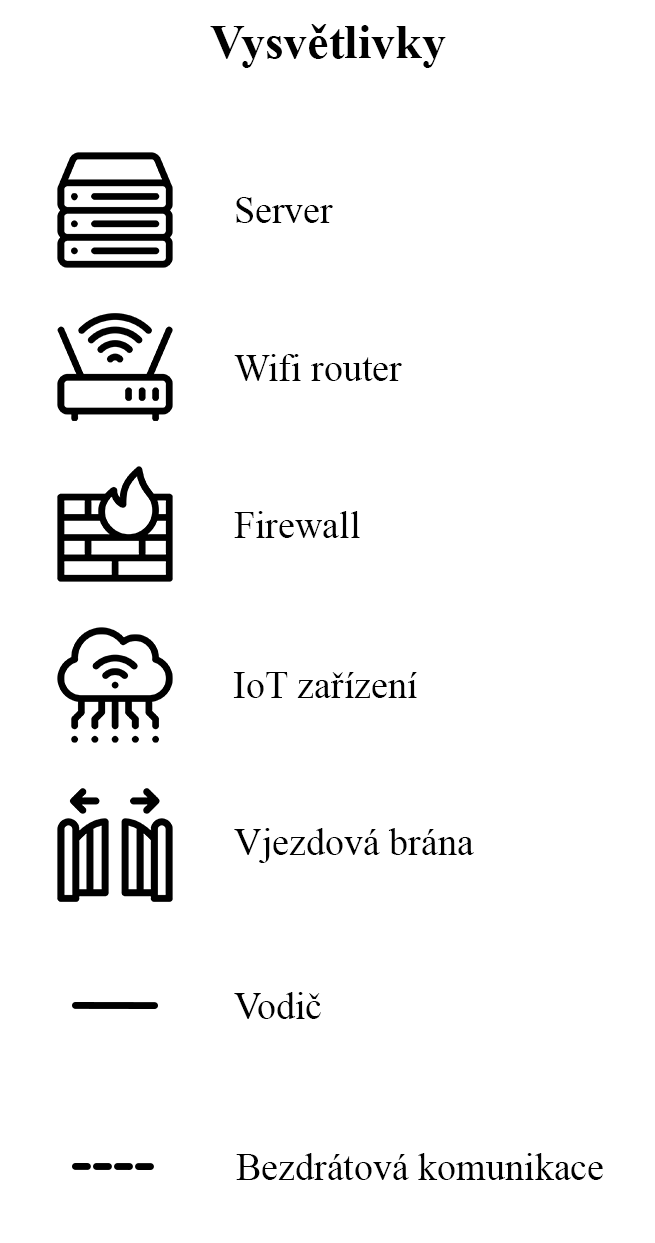
<style>
.page{position:relative;width:655px;height:1243px;background:#ffffff}
.page>*{position:absolute;margin:0}
.t1{font:48px "TimesNewRomanPS-BoldMT";color:#000000}
.t2{font:38px "TimesNewRomanPSMT";color:#000000}
</style>
<div class="page">
<p class="t1" style="left:210px;top:24px;width:236px;height:44px">Vysvětlivky</p>
<p class="t2" style="left:236px;top:197px;width:97px;height:26px">Server</p>
<p class="t2" style="left:234px;top:354px;width:168px;height:27px">Wifi router</p>
<p class="t2" style="left:234px;top:511px;width:126px;height:27px">Firewall</p>
<p class="t2" style="left:233px;top:672px;width:184px;height:26px">IoT zařízení</p>
<p class="t2" style="left:234px;top:828px;width:240px;height:35px">Vjezdová brána</p>
<p class="t2" style="left:234px;top:992px;width:87px;height:27px">Vodič</p>
<p class="t2" style="left:236px;top:1153px;width:367px;height:27px">Bezdrátová komunikace</p>
</div>
